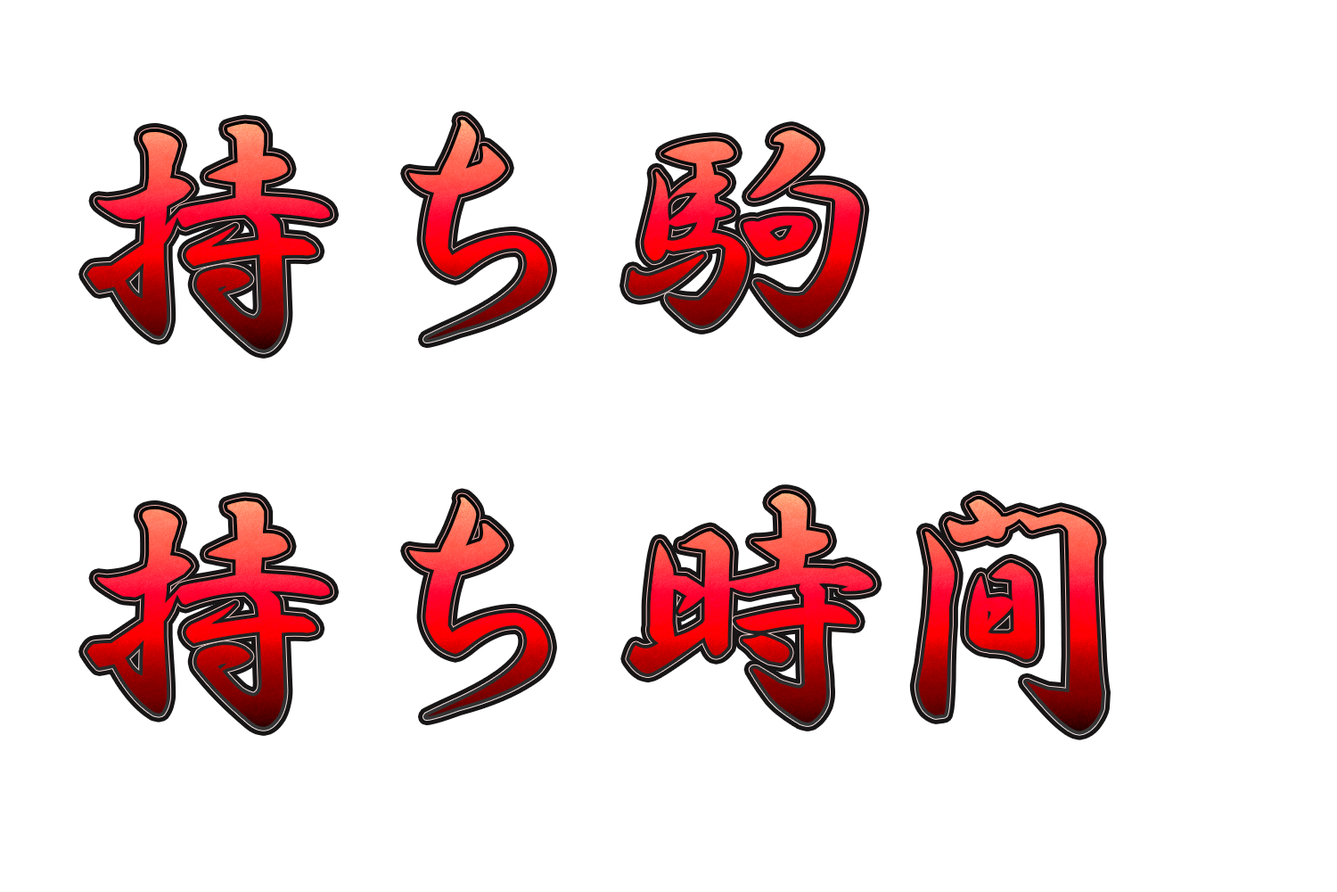
<style>
.page{position:relative;width:1337px;height:892px;background:#ffffff}
.page>*{position:absolute;margin:0}
.t1{font:267.5px "HGSGyoshotai"}
</style>
<div class="page">
<p class="t1" style="left:87px;top:119px;width:774px;height:231px">持ち駒</p>
<p class="t1" style="left:87px;top:493px;width:1015px;height:238px">持ち時間</p>
</div>
